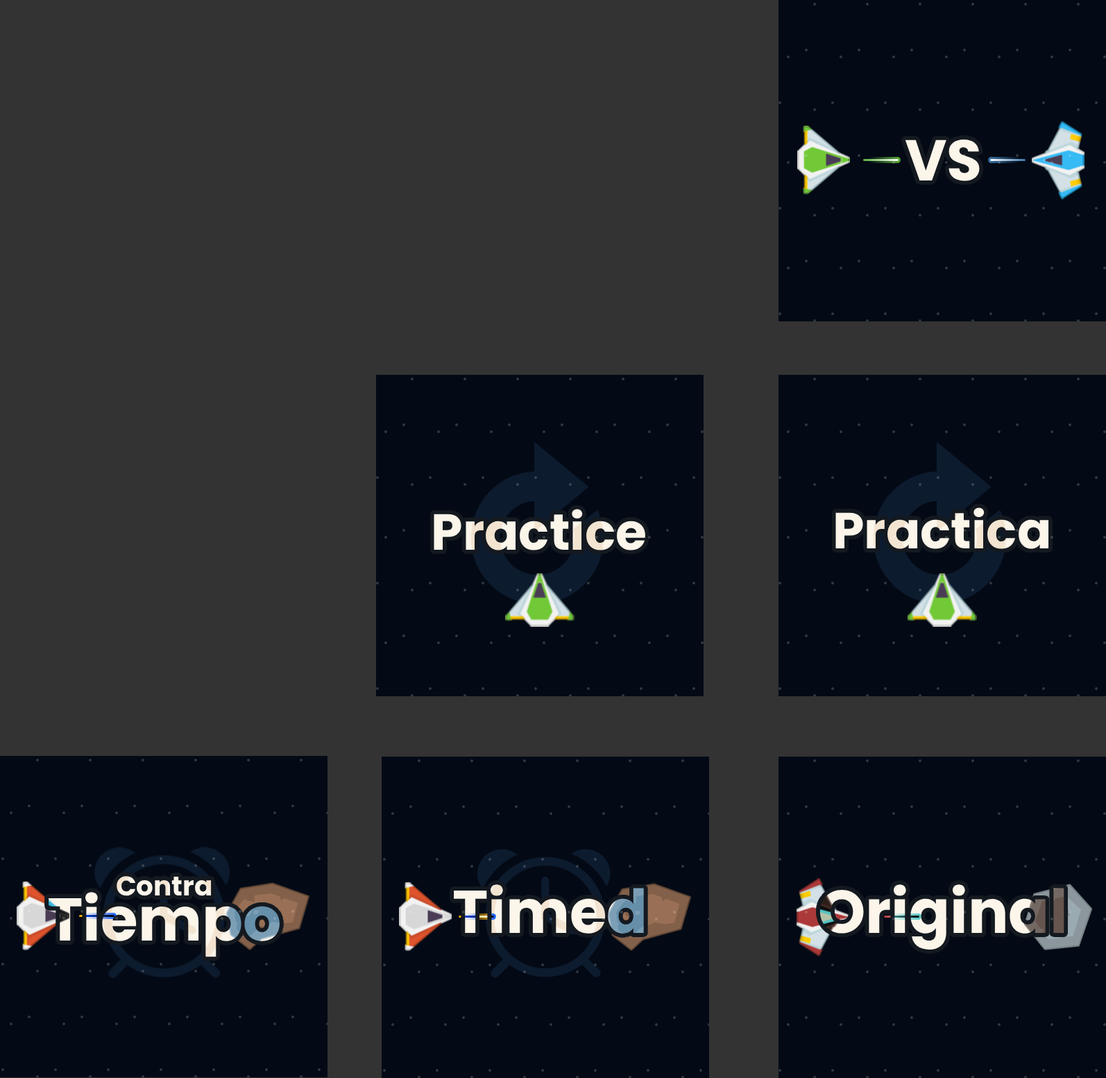
<style>
.page{position:relative;width:1106px;height:1078px;background:#333333}
.page>*{position:absolute;margin:0}
.t1{font:57.6px "Poppins-Bold";color:#ffffff}
.t2{font:50.7px "Poppins-Bold";color:#ffffff}
.t3{font:60.4px "Poppins-Bold"}
.t4{font:60.4px "Poppins-Bold";color:#ffffff}
</style>
<div class="page">
<p class="t1" style="left:905px;top:139px;width:75px;height:42px">VS</p>
<p class="t2" style="left:434px;top:509px;width:211px;height:41px">Practice</p>
<p class="t2" style="left:836px;top:507px;width:213px;height:42px">Practica</p>
<p class="t3" style="left:454px;top:884px;width:190px;height:49px">Timed</p>
<p class="t4" style="left:820px;top:884px;width:245px;height:65px">Original</p>
</div>
